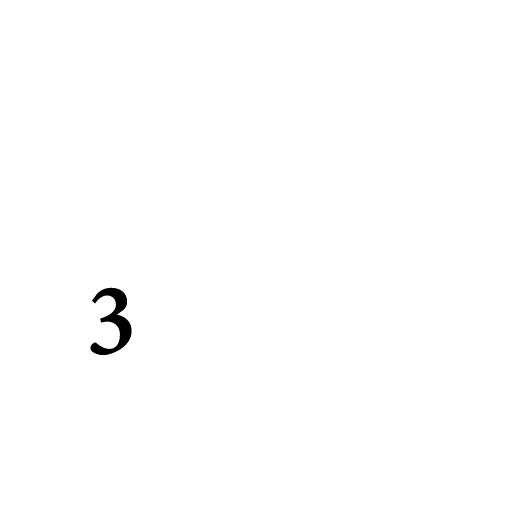
<style>
.page{position:relative;width:512px;height:512px;background:#ffffff}
.page>*{position:absolute;margin:0}
.t1{font:112px "AdobeGurmukhi-Bold";color:#000000}
</style>
<div class="page">
<p class="t1" style="left:90px;top:287px;width:42px;height:68px">3</p>
</div>
